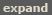
<style>
.page{position:relative;width:52px;height:15px;background:#5a5a5a}
.page>*{position:absolute;margin:0}
.t1{font:11px "Verdana-Bold";color:#dedbcb}
</style>
<div class="page">
<p class="t1" style="left:3px;top:3px;width:45px;height:11px">expand</p>
</div>
